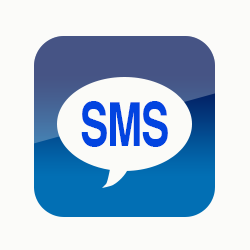
<style>
.page{position:relative;width:250px;height:250px;background:#fbfbf9}
.page>*{position:absolute;margin:0}
.t1{font:57px "H2gtrE";letter-spacing:-0.06em;color:#0244e0;scale:0.72 1}
</style>
<div class="page">
<p class="t1" style="left:81px;top:101px;width:87px;height:46px">SMS</p>
</div>
